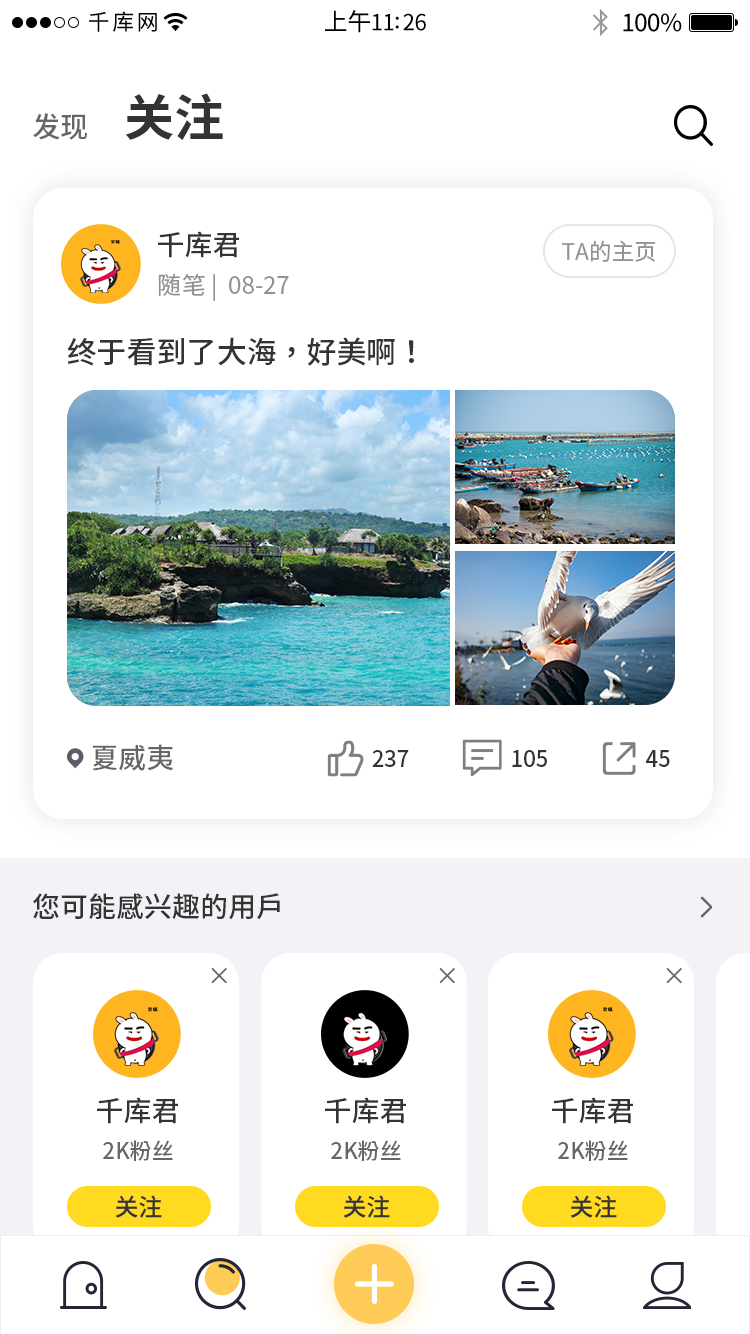
<style>
.page{position:relative;width:750px;height:1334px;background:#ffffff}
.page>*{position:absolute;margin:0}
.t1{font:50px "SourceHanSansSC-Bold";color:#333333}
.t2{font:28px "SourceHanSansSC-Medium";color:#666666}
.t3{font:27.8px "SourceHanSansSC-Medium";color:#333333}
.t4{font:22.8px "SourceHanSansSC-Regular";color:#929292}
.t5{font:24px "SourceHanSansSC-Regular";color:#929292}
.t6{font:30px "SourceHanSansSC-Medium";color:#333333}
.t7{font:27.8px "SourceHanSansSC-Medium";color:#666666}
.t8{font:22px "SourceHanSansSC-Medium";color:#333333}
.t9{font:28px "SourceHanSansSC-Medium";color:#333333}
.t10{font:22px "SourceHanSansSC-Medium";color:#666666}
.t11{font:24px "SourceHanSansSC-Medium";color:#333333}
</style>
<div class="page">
<p class="t1" style="left:125px;top:93px;width:98px;height:47px">关注</p>
<p class="t2" style="left:33px;top:113px;width:54px;height:27px">发现</p>
<p class="t3" style="left:158px;top:231px;width:81px;height:27px">千库君</p>
<p class="t4" style="left:562px;top:240px;width:94px;height:22px">TA的主页</p>
<p class="t5" style="left:158px;top:273px;width:131px;height:28px">随笔 |  08-27</p>
<p class="t6" style="left:67px;top:337px;width:347px;height:29px">终于看到了大海，好美啊！</p>
<p class="t7" style="left:93px;top:744px;width:81px;height:27px">夏威夷</p>
<p class="t8" style="left:372px;top:750px;width:37px;height:17px">237</p>
<p class="t8" style="left:512px;top:750px;width:35px;height:17px">105</p>
<p class="t8" style="left:646px;top:750px;width:24px;height:17px">45</p>
<p class="t9" style="left:33px;top:893px;width:247px;height:27px">您可能感兴趣的用户</p>
<p class="t3" style="left:97px;top:1097px;width:81px;height:27px">千库君</p>
<p class="t3" style="left:325px;top:1097px;width:81px;height:27px">千库君</p>
<p class="t3" style="left:552px;top:1097px;width:81px;height:27px">千库君</p>
<p class="t10" style="left:103px;top:1140px;width:70px;height:21px">2K粉丝</p>
<p class="t10" style="left:331px;top:1140px;width:70px;height:21px">2K粉丝</p>
<p class="t10" style="left:558px;top:1140px;width:70px;height:21px">2K粉丝</p>
<p class="t11" style="left:115px;top:1195px;width:47px;height:23px">关注</p>
<p class="t11" style="left:343px;top:1195px;width:47px;height:23px">关注</p>
<p class="t11" style="left:570px;top:1195px;width:47px;height:23px">关注</p>
</div>
